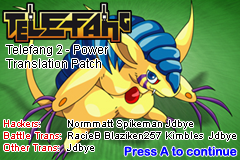
<style>
.page{position:relative;width:240px;height:160px}
.page>*{position:absolute;margin:0}
.t1{font:12px "ArialMT";color:#000000}
.t2{font:10px "ArialMT";color:#df0000}
.t3{font:10px "ArialMT";color:#000000}
.t4{font:12px "ArialRoundedMTBold";color:#0000ff}
</style>
<div class="page">
<p class="t1" style="left:6px;top:45px;width:102px;height:23px">Telefang 2 - Power<br>Translation Patch</p>
<p class="t2" style="left:4px;top:120px;width:57px;height:31px">Hackers:        <br>Battle Trans: <br>Other Trans:</p>
<p class="t3" style="left:67px;top:120px;width:169px;height:33px">Normmatt Spikeman Jdbye<br>RacieB Blaziken257 Kimbles  Jdbye<br>Jdbye</p>
<p class="t4" style="left:124px;top:146px;width:113px;height:10px">Press A to continue</p>
</div>
